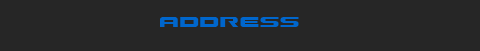
<style>
.page{position:relative;width:480px;height:51px;background:#262626}
.page>*{position:absolute;margin:0}
.t1{font:15.8px "Gunship";color:#0066cc;scale:1.22 1}
</style>
<div class="page">
<p class="t1" style="left:160px;top:17px;width:139px;height:10px">Address</p>
</div>
